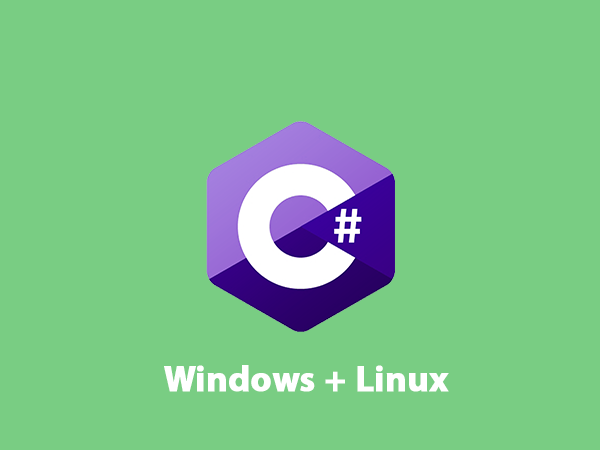
<style>
.page{position:relative;width:600px;height:450px;background:#79cd83}
.page>*{position:absolute;margin:0}
.t1{font:36px "MyriadPro-Bold";color:#ffffff;font-weight:bold}
</style>
<div class="page">
<p class="t1" style="left:164px;top:365px;width:285px;height:27px">Windows + Linux</p>
</div>
